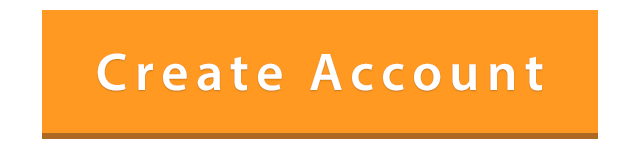
<style>
.page{position:relative;width:640px;height:150px;background:#ff9921}
.page>*{position:absolute;margin:0}
.t1{font:53.3px "MyriadPro-Semibold";letter-spacing:0.14em;color:#ffffff}
</style>
<div class="page">
<p class="t1" style="left:97px;top:53px;width:446px;height:38px">Create Account</p>
</div>
